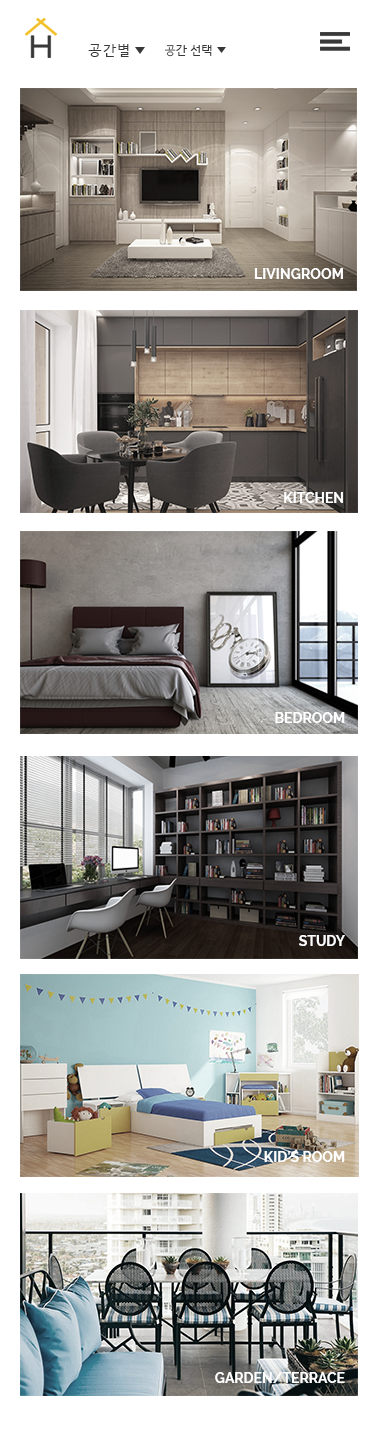
<style>
.page{position:relative;width:375px;height:1430px;background:#ffffff}
.page>*{position:absolute;margin:0}
.t1{font:14px "HCRDotum";letter-spacing:0.1em;color:#383838}
.t2{font:11.9px "HCRDotum";color:#383838}
.t3{font:14px "Raleway-Bold";color:#ffffff}
</style>
<div class="page">
<p class="t1" style="left:88px;top:44px;width:41px;height:13px">공간별</p>
<p class="t2" style="left:164px;top:45px;width:48px;height:12px">공간 선택</p>
<p class="t3" style="left:254px;top:268px;width:89px;height:11px">LIVINGROOM</p>
<p class="t3" style="left:284px;top:492px;width:59px;height:11px">KITCHEN</p>
<p class="t3" style="left:275px;top:712px;width:70px;height:11px">BEDROOM</p>
<p class="t3" style="left:299px;top:935px;width:46px;height:11px">STUDY</p>
<p class="t3" style="left:264px;top:1151px;width:81px;height:11px">KID’S ROOM</p>
<p class="t3" style="left:215px;top:1372px;width:130px;height:11px">GARDEN/TERRACE</p>
</div>
